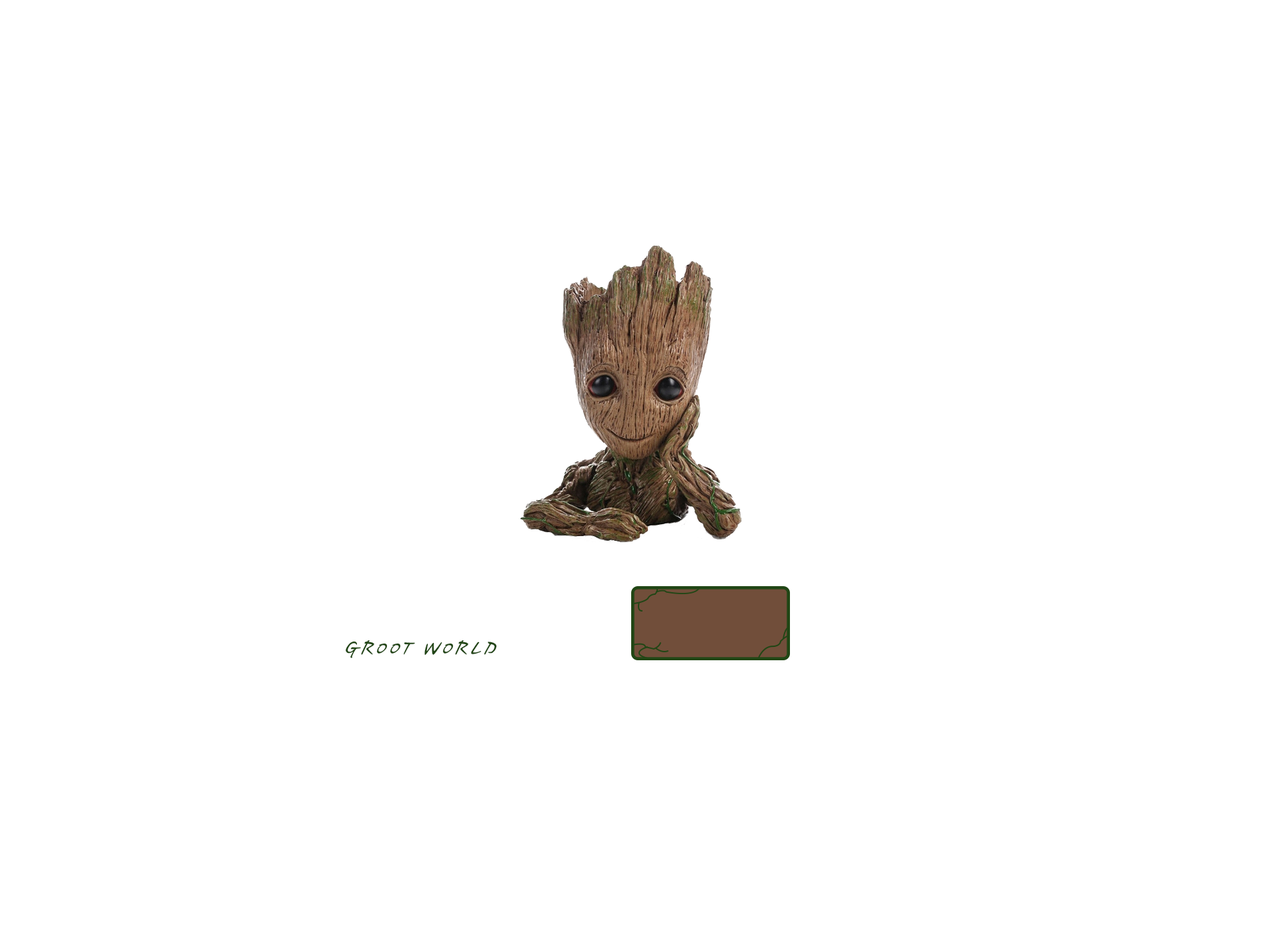
<style>
.page{position:relative;width:1261px;height:946px;background:#ffffff}
.page>*{position:absolute;margin:0}
.t1{font:33.4px "HaanCjaM";color:#214615}
</style>
<div class="page">
<p class="t1" style="left:346px;top:640px;width:151px;height:18px">GROOT WORLD</p>
</div>
